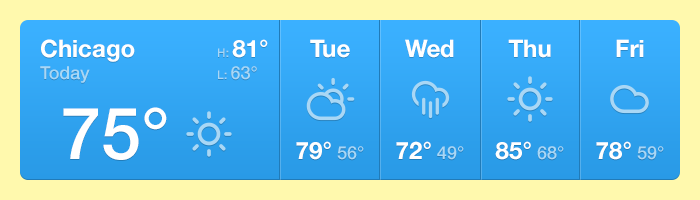
<style>
.page{position:relative;width:700px;height:200px;background:#fff9ad}
.page>*{position:absolute;margin:0}
.t1{font:24px/22px "HelveticaNeue-Bold";color:#ffffff}
.t2{font:18px/22px "HelveticaNeue-Medium";color:#a9d7f5}
.t3{font:12px/22px "HelveticaNeue-Medium";color:#a9d7f5}
.t4{font:24px "HelveticaNeue-Bold";color:#ffffff}
.t5{font:72px "HelveticaNeue-Medium";color:#ffffff}
.t6{font:18px "HelveticaNeue-Medium";color:#a9d7f5}
</style>
<div class="page">
<p class="t1" style="left:40px;top:39px;width:95px;height:44px">Chicago<br><span class="t2">Today</span></p>
<p class="t1" style="left:218px;top:39px;width:50px;height:41px"><span class="t3">H: </span>81°<br><span class="t3">L: </span><span class="t2">63°</span></p>
<p class="t4" style="left:310px;top:39px;width:40px;height:19px">Tue</p>
<p class="t4" style="left:405px;top:39px;width:49px;height:19px">Wed</p>
<p class="t4" style="left:508px;top:39px;width:43px;height:19px">Thu</p>
<p class="t4" style="left:616px;top:39px;width:28px;height:18px">Fri</p>
<p class="t5" style="left:63px;top:107px;width:104px;height:53px">75°</p>
<p class="t4" style="left:296px;top:141px;width:68px;height:19px">79°<span class="t6"> 56°</span></p>
<p class="t4" style="left:396px;top:141px;width:68px;height:19px">72°<span class="t6"> 49°</span></p>
<p class="t4" style="left:495px;top:141px;width:69px;height:19px">85°<span class="t6"> 68°</span></p>
<p class="t4" style="left:596px;top:141px;width:68px;height:19px">78°<span class="t6"> 59°</span></p>
</div>
